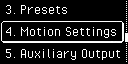
<style>
.page{position:relative;width:128px;height:64px;background:#000000}
.page>*{position:absolute;margin:0}
.t1{font:16px "PixelOperator";color:#ffffff}
</style>
<div class="page">
<p class="t1" style="left:6px;top:5px;width:10px;height:9px">3.</p>
<p class="t1" style="left:20px;top:5px;width:47px;height:9px">Presets</p>
<p class="t1" style="left:6px;top:27px;width:10px;height:9px">4.</p>
<p class="t1" style="left:20px;top:27px;width:96px;height:11px">Motion Settings</p>
<p class="t1" style="left:6px;top:49px;width:10px;height:9px">5.</p>
<p class="t1" style="left:20px;top:49px;width:100px;height:11px">Auxiliary Output</p>
</div>
